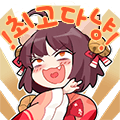
<style>
.page{position:relative;width:120px;height:120px}
.page>*{position:absolute;margin:0}
.t1{font:37.6px "777Kidbutterfly";letter-spacing:-0.08em;color:#fc562a}
</style>
<div class="page">
<p class="t1" style="left:36px;top:6px;width:22px;height:23px;rotate:-9deg">고</p>
<p class="t1" style="left:61px;top:6px;width:26px;height:20px;rotate:18deg">다</p>
<p class="t1" style="left:5px;top:12px;width:29px;height:26px;rotate:-31deg">최</p>
<p class="t1" style="left:90px;top:8px;width:26px;height:33px;rotate:39deg">냥</p>
</div>
